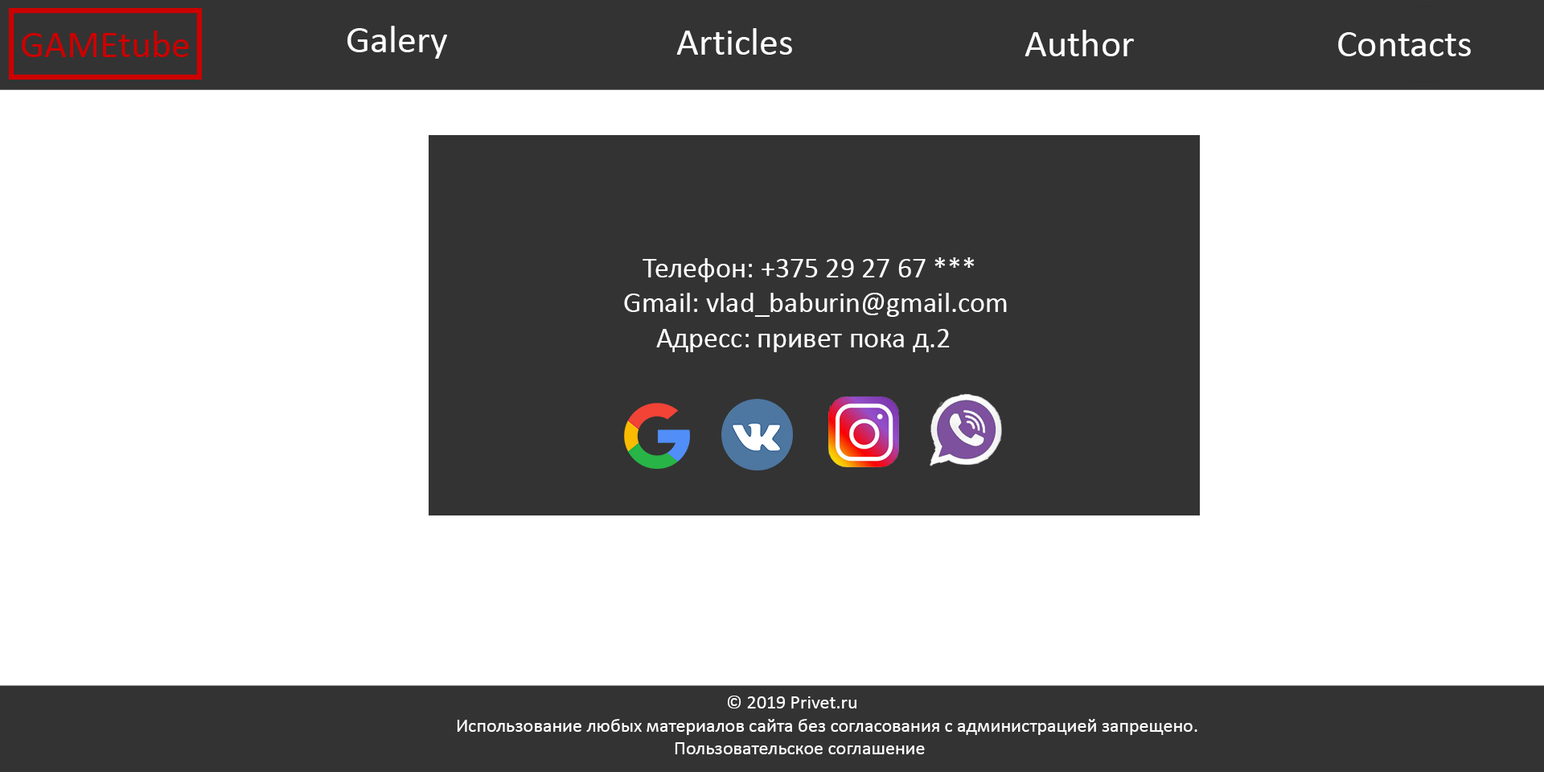
<style>
.page{position:relative;width:1544px;height:772px;background:#ffffff}
.page>*{position:absolute;margin:0}
.t1{font:29px "Calibri";color:#ffffff}
.t2{font:19.3px "Calibri";color:#ffffff}
</style>
<div class="page">
<p class="t1" style="left:624px;top:257px;width:383px;height:95px">Телефон: +375 29 27 67 ***<br>Gmail: vlad_baburin@gmail.com<br>     Адресс: привет пока д.2</p>
<p class="t2" style="left:457px;top:696px;width:741px;height:58px">© 2019 Privet.ru<br>Использование любых материалов сайта без согласования с администрацией запрещено.<br>                                                  Пользовательское соглашение</p>
</div>
